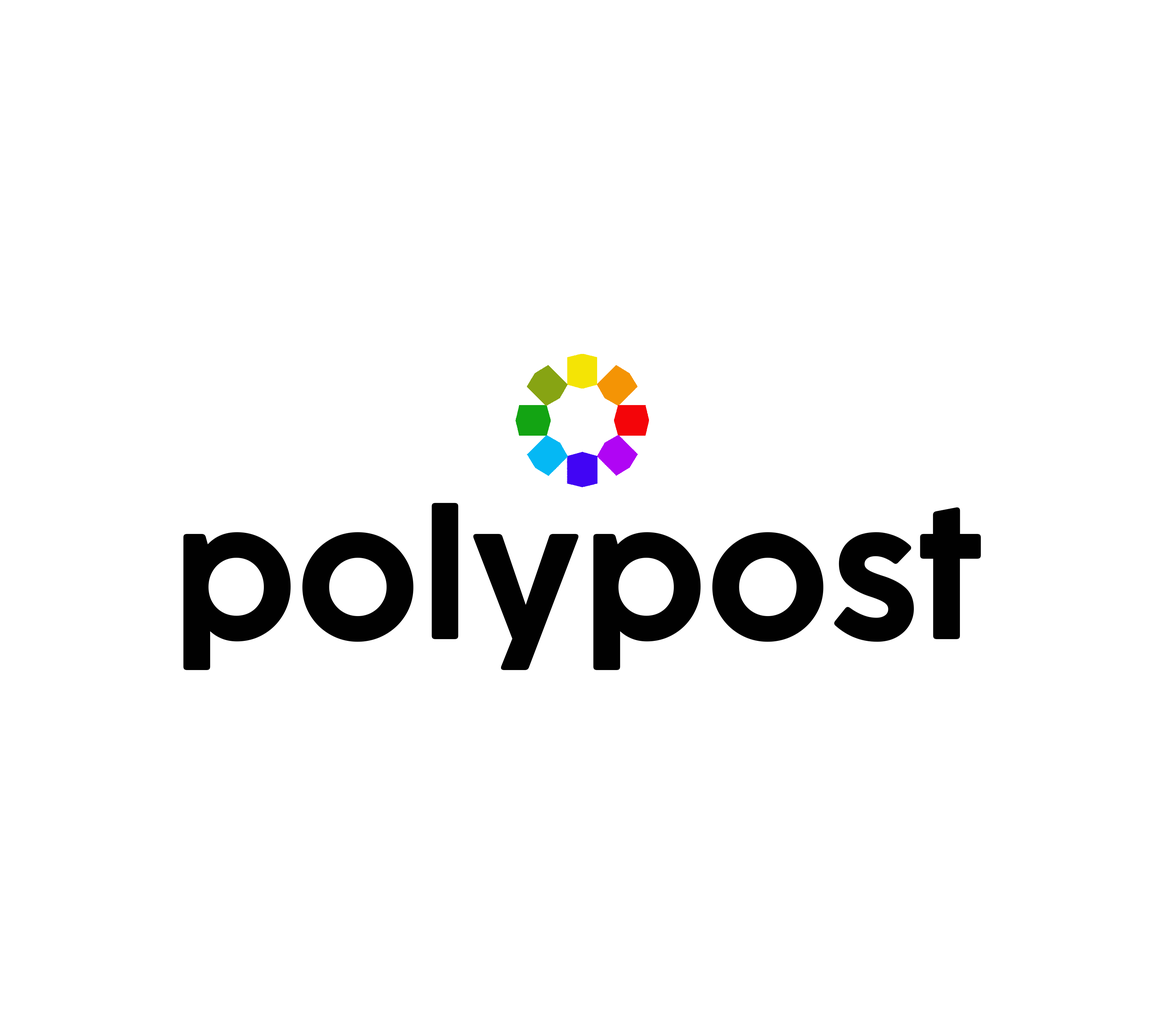
<style>
.page{position:relative;width:1164px;height:1024px;background:#ffffff}
.page>*{position:absolute;margin:0}
.t1{font:162px "CocogooseProTrial-Darkmode";color:#010101}
</style>
<div class="page">
<p class="t1" style="left:183px;top:503px;width:799px;height:167px">polypost</p>
</div>
